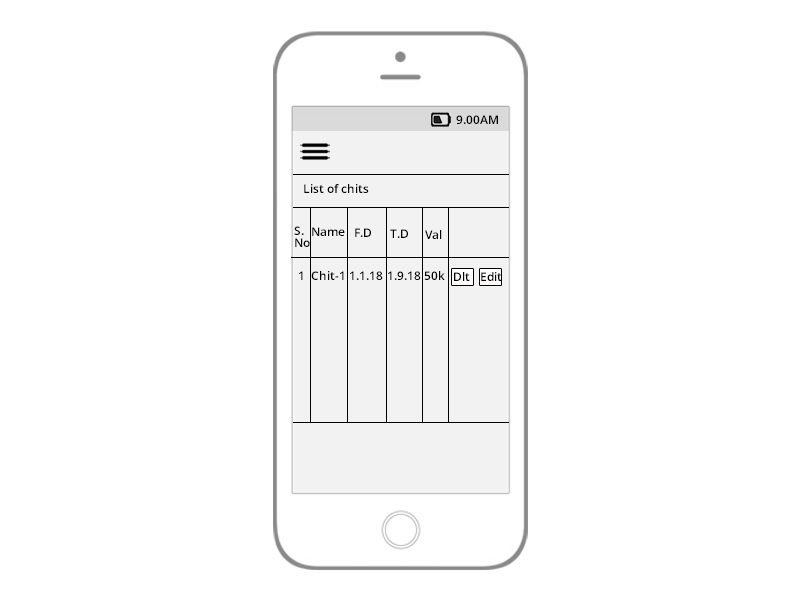
<style>
.page{position:relative;width:800px;height:600px;background:#ffffff}
.page>*{position:absolute;margin:0}
.t1{font:12px "OpenSans-Semibold";color:#000000}
.t2{font:12px/6px "OpenSans-Semibold";color:#000000}
</style>
<div class="page">
<p class="t1" style="left:456px;top:115px;width:42px;height:9px">9.00AM</p>
<p class="t1" style="left:304px;top:184px;width:65px;height:9px">List of chits</p>
<p class="t2" style="left:294px;top:226px;width:16px;height:21px">S.<br><br>No</p>
<p class="t1" style="left:312px;top:227px;width:33px;height:9px">Name</p>
<p class="t1" style="left:355px;top:228px;width:16px;height:9px">F.D</p>
<p class="t1" style="left:390px;top:229px;width:18px;height:9px">T.D</p>
<p class="t1" style="left:425px;top:230px;width:17px;height:9px">Val</p>
<p class="t1" style="left:299px;top:271px;width:4px;height:9px">1</p>
<p class="t1" style="left:311px;top:271px;width:33px;height:9px">Chit-1</p>
<p class="t1" style="left:350px;top:271px;width:33px;height:9px">1.1.18</p>
<p class="t1" style="left:388px;top:271px;width:33px;height:9px">1.9.18</p>
<p class="t1" style="left:424px;top:271px;width:21px;height:9px">50k</p>
<p class="t1" style="left:454px;top:272px;width:16px;height:9px">Dlt</p>
<p class="t1" style="left:481px;top:272px;width:21px;height:9px">Edit</p>
</div>
